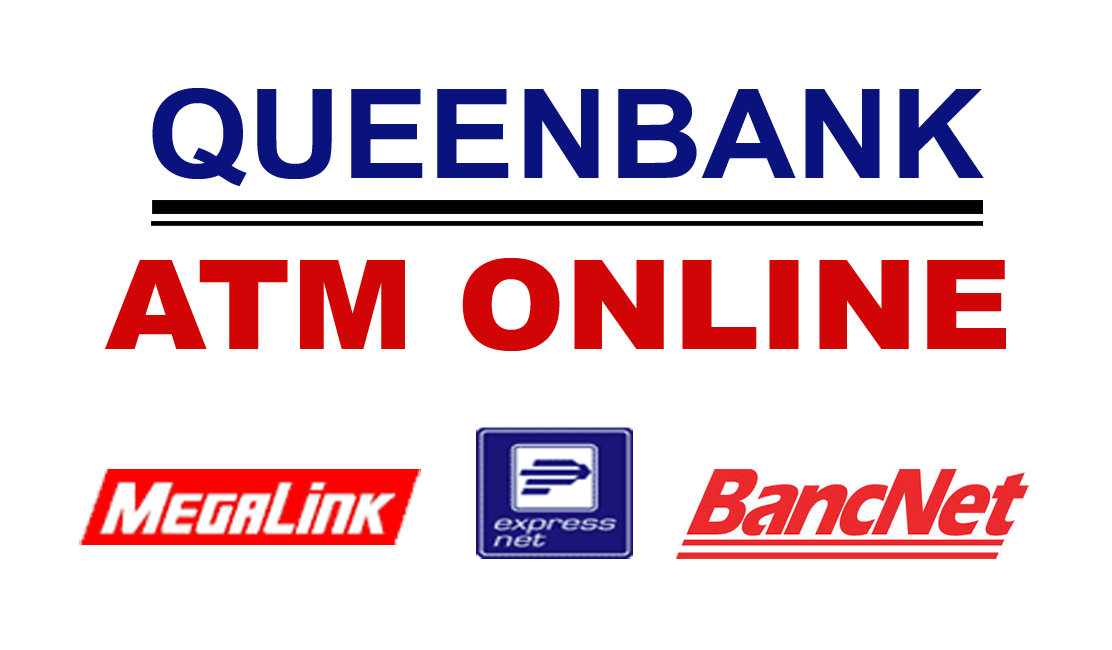
<style>
.page{position:relative;width:1112px;height:650px;background:#ffffff}
.page>*{position:absolute;margin:0}
.t1{font:124.3px "Arial-BoldMT";color:#0a127d;scale:1.04 1}
.t2{font:124.3px "Arial-Black";color:#d10505;scale:1.04 1}
</style>
<div class="page">
<p class="t1" style="left:152px;top:88px;width:832px;height:98px">QUEENBANK</p>
<p class="t2" style="left:105px;top:258px;width:901px;height:93px">ATM ONLINE</p>
</div>
